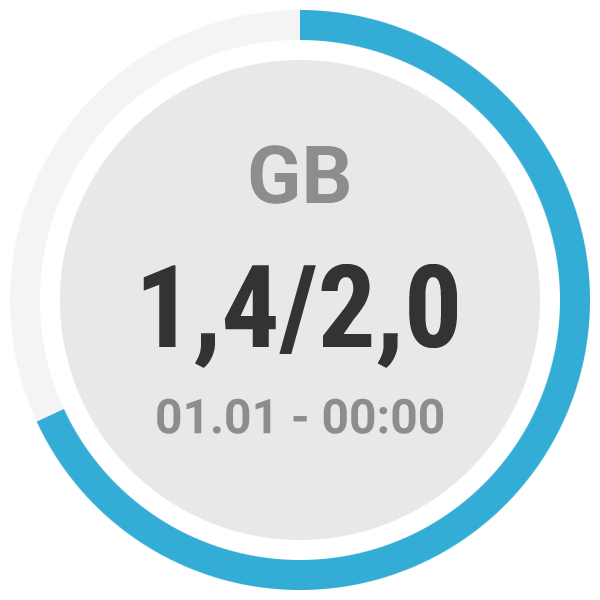
<style>
.page{position:relative;width:600px;height:600px;background:#e8e8e8}
.page>*{position:absolute;margin:0}
.t1{font:80px "Roboto-Bold";color:#8d8d8d}
.t2{font:115px "RobotoCondensed-Bold";color:#333333}
.t3{font:48px "Roboto-Bold";color:#8d8d8d}
</style>
<div class="page">
<p class="t1" style="left:250px;top:145px;width:99px;height:59px">GB</p>
<p class="t2" style="left:143px;top:264px;width:314px;height:104px">1,4/2,0</p>
<p class="t3" style="left:157px;top:398px;width:286px;height:36px">01.01 - 00:00</p>
</div>
